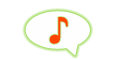
<style>
.page{position:relative;width:120px;height:60px;background:#ffffff}
.page>*{position:absolute;margin:0}
.t1{font:38.9px "ArialNarrow";letter-spacing:-0.05em;color:#ff4400;font-variant:small-caps}
</style>
<div class="page">
<p class="t1" style="left:49px;top:17px;width:19px;height:27px">♪</p>
</div>
